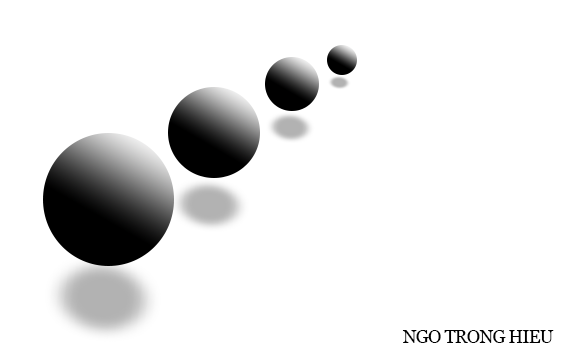
<style>
.page{position:relative;width:563px;height:353px;background:#ffffff}
.page>*{position:absolute;margin:0}
.t1{font:18px "Georgia";letter-spacing:-0.04em;color:#000000;text-transform:uppercase}
</style>
<div class="page">
<p class="t1" style="left:402px;top:330px;width:152px;height:13px">NGO TRONG HIEU</p>
</div>
